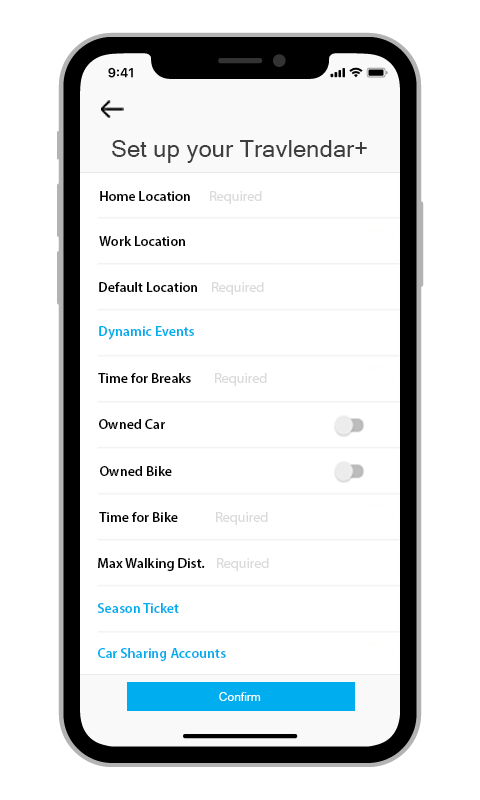
<style>
.page{position:relative;width:480px;height:800px;background:#ffffff}
.page>*{position:absolute;margin:0}
.t1{font:24px "MicrosoftSansSerif";color:#3e3e3e}
.t2{font:14px "MyriadPro-Semibold";color:#000000}
.t3{font:14px "MyriadPro-Regular";color:#dadada}
.t4{font:14px "MyriadPro-Semibold";color:#00aeef}
</style>
<div class="page">
<p class="t1" style="left:112px;top:140px;width:255px;height:23px">Set up your Travlendar+</p>
<p class="t2" style="left:100px;top:191px;width:90px;height:10px">Home Location</p>
<p class="t3" style="left:210px;top:191px;width:52px;height:13px">Required</p>
<p class="t2" style="left:99px;top:236px;width:86px;height:10px">Work Location</p>
<p class="t2" style="left:99px;top:282px;width:98px;height:10px">Default Location</p>
<p class="t3" style="left:212px;top:282px;width:52px;height:13px">Required</p>
<p class="t4" style="left:99px;top:326px;width:95px;height:14px">Dynamic Events</p>
<p class="t2" style="left:98px;top:373px;width:93px;height:10px">Time for Breaks</p>
<p class="t3" style="left:215px;top:373px;width:52px;height:13px">Required</p>
<p class="t2" style="left:99px;top:419px;width:66px;height:10px">Owned Car</p>
<p class="t2" style="left:100px;top:466px;width:72px;height:10px">Owned Bike</p>
<p class="t2" style="left:99px;top:512px;width:79px;height:10px">Time for Bike</p>
<p class="t3" style="left:216px;top:512px;width:52px;height:13px">Required</p>
<p class="t2" style="left:98px;top:558px;width:107px;height:13px">Max Walking Dist.</p>
<p class="t3" style="left:217px;top:558px;width:52px;height:13px">Required</p>
<p class="t4" style="left:97px;top:603px;width:82px;height:10px">Season Ticket</p>
<p class="t4" style="left:98px;top:648px;width:128px;height:13px">Car Sharing Accounts</p>
</div>
